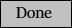
<style>
.page{position:relative;width:72px;height:28px;background:#c0c0c0}
.page>*{position:absolute;margin:0}
.t1{font:18px "SitkaBanner";color:#000000}
</style>
<div class="page">
<p class="t1" style="left:16px;top:7px;width:36px;height:11px">Done</p>
</div>
